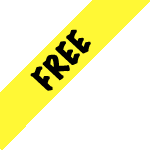
<style>
.page{position:relative;width:150px;height:150px;background:#ffffff}
.page>*{position:absolute;margin:0}
.t1{font:30px "MarkerFelt-Wide";letter-spacing:0.05em;color:#000000}
</style>
<div class="page">
<p class="t1" style="left:30px;top:29px;width:61px;height:62px;rotate:-47deg">FREE</p>
</div>
